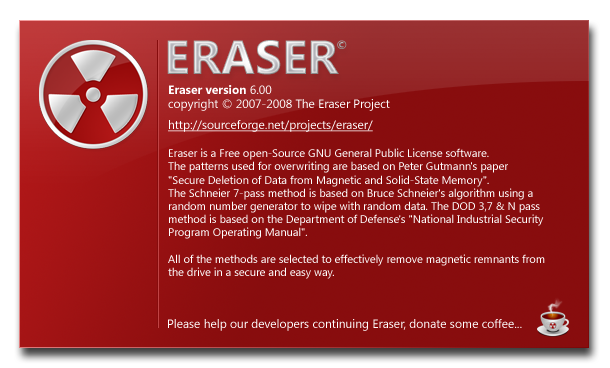
<style>
.page{position:relative;width:610px;height:368px}
.page>*{position:absolute;margin:0}
.t1{font:48px "SegoeUI-Bold"}
.t2{font:12px "SegoeUI-Bold";color:#b1b1b1}
.t3{font:12px "SegoeUI";color:#ffffff}
.t4{font:12px "SegoeUI-Bold";color:#ffffff}
.t5{font:12px "SegoeUI";color:#ffffff;text-decoration:underline}
.t6{font:11px "SegoeUI";color:#ffffff}
.t7{font:11px "SegoeUI-Bold";color:#ffffff}
</style>
<div class="page">
<p class="t1" style="left:167px;top:40px;width:172px;height:35px">ERASER</p>
<p class="t2" style="left:337px;top:40px;width:10px;height:9px">©</p>
<p class="t3" style="left:168px;top:85px;width:222px;height:26px"><span class="t4">Eraser version</span> 6.00<br>copyright © 2007-2008 The Eraser Project</p>
<p class="t5" style="left:168px;top:120px;width:205px;height:12px">http://sourceforge.net/projects/eraser/</p>
<p class="t6" style="left:168px;top:148px;width:377px;height:131px">Eraser is a Free open-Source GNU General Public License software. <br>The patterns used for overwriting are based on Peter Gutmann's paper <br>"Secure Deletion of Data from Magnetic and Solid-State Memory". <br>The Schneier 7-pass method is based on Bruce Schneier's algorithm using a<br>random number generator to wipe with random data. The DOD 3,7 &amp; N pass <br>method is based on the Department of Defense's "National Industrial Security<br>Program Operating Manual".<br><br>All of the methods are selected to effectively remove magnetic remnants from<br>the drive in a secure and easy way.<br><br><span class="t7">Eraser Volunteers:<br></span>Sami Solvanen, Garrett Trant, Joel Low, Dennis van Lith, ............</p>
<p class="t3" style="left:168px;top:319px;width:354px;height:12px">Please help our developers continuing Eraser, donate some coffee...</p>
</div>
